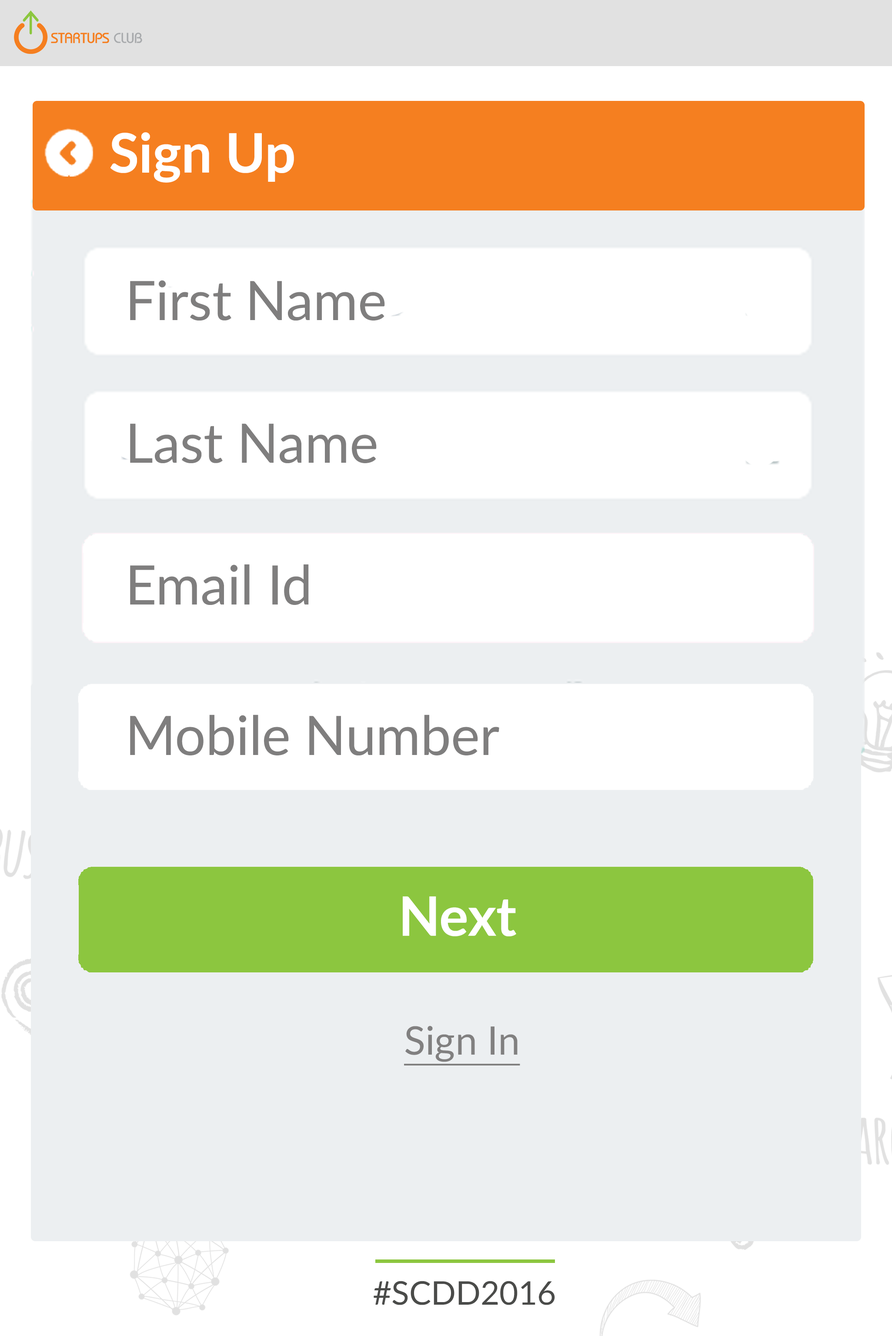
<style>
.page{position:relative;width:892px;height:1336px;background:#ffffff}
.page>*{position:absolute;margin:0}
.t1{font:54.4px "Lato-Bold";color:#ffffff}
.t2{font:54.4px "Lato-Regular";color:#7f7e7e}
.t3{font:39.4px "Lato-Regular";color:#818080;text-decoration:underline}
.t4{font:32.6px "Lato-Regular";color:#4a4b49}
</style>
<div class="page">
<p class="t1" style="left:110px;top:132px;width:184px;height:51px">Sign Up</p>
<p class="t2" style="left:130px;top:280px;width:255px;height:41px">First Name</p>
<p class="t2" style="left:130px;top:424px;width:247px;height:39px">Last Name</p>
<p class="t2" style="left:130px;top:564px;width:179px;height:41px">Email Id</p>
<p class="t2" style="left:130px;top:715px;width:369px;height:41px">Mobile Number</p>
<p class="t1" style="left:403px;top:897px;width:113px;height:40px">Next</p>
<p class="t3" style="left:404px;top:1026px;width:116px;height:40px">Sign In</p>
<p class="t4" style="left:374px;top:1281px;width:181px;height:25px">#SCDD2016</p>
</div>
